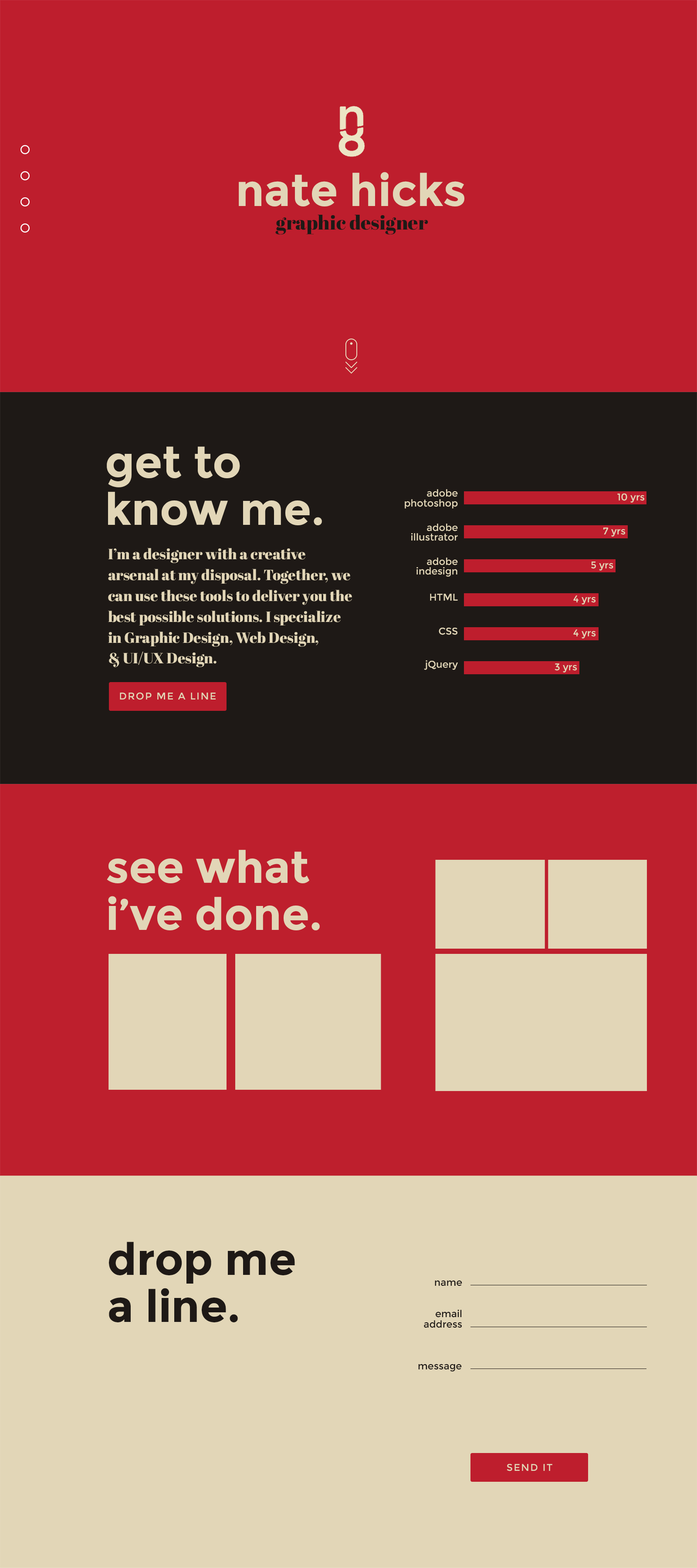
<style>
.page{position:relative;width:697px;height:1568px;background:#e2d6b7}
.page>*{position:absolute;margin:0}
.t1{font:44.6px "Montserrat-Bold";color:#e2d6b7}
.t2{font:19.7px "AbrilFatface-Regular";color:#1e1916}
.t3{font:44.4px/47px "Montserrat-Bold";color:#e2d6b7}
.t4{font:9.8px/9.8px "Montserrat-Regular";color:#e2d6b7}
.t5{font:9.8px "Montserrat-Regular";color:#e2d6b7}
.t6{font:14.8px/20.9px "AbrilFatface-Regular";color:#e2d6b7}
.t7{font:9.8px "Montserrat-Regular";letter-spacing:0.1em;color:#e2d6b7}
.t8{font:44.4px/47px "Montserrat-Bold";color:#1e1916}
.t9{font:9.8px "Montserrat-Regular";color:#1e1916}
.t10{font:9.8px/10.5px "Montserrat-Regular";color:#1e1916}
</style>
<div class="page">
<p class="t1" style="left:239px;top:172px;width:225px;height:34px">nate hicks</p>
<p class="t2" style="left:275px;top:215px;width:153px;height:20px">graphic designer</p>
<p class="t3" style="left:107px;top:446px;width:215px;height:79px">get to know me.</p>
<p class="t4" style="left:405px;top:489px;width:53px;height:20px;text-align:right">adobe<br>photoshop</p>
<p class="t5" style="left:617px;top:493px;width:27px;height:10px">10 yrs</p>
<p class="t4" style="left:411px;top:524px;width:47px;height:17px;text-align:right">adobe<br>illustrator</p>
<p class="t5" style="left:603px;top:527px;width:22px;height:10px">7 yrs</p>
<p class="t6" style="left:108px;top:548px;width:244px;height:119px">I’m a designer with a creative arsenal at my disposal. Together, we can use these tools to deliver you the best possible solutions. I specialize in Graphic Design, Web Design, <br>&amp; UI/UX Design.</p>
<p class="t4" style="left:416px;top:558px;width:42px;height:19px;text-align:right">adobe<br>indesign</p>
<p class="t5" style="left:591px;top:561px;width:22px;height:10px">5 yrs</p>
<p class="t5" style="left:430px;top:594px;width:28px;height:7px">HTML</p>
<p class="t5" style="left:573px;top:595px;width:22px;height:10px">4 yrs</p>
<p class="t5" style="left:439px;top:628px;width:18px;height:7px">CSS</p>
<p class="t5" style="left:573px;top:629px;width:22px;height:10px">4 yrs</p>
<p class="t5" style="left:424px;top:660px;width:34px;height:10px">jQuery</p>
<p class="t5" style="left:554px;top:663px;width:23px;height:9px">3 yrs</p>
<p class="t7" style="left:120px;top:693px;width:96px;height:7px">DROP ME A LINE</p>
<p class="t3" style="left:107px;top:850px;width:213px;height:80px">see what<br>i’ve done.</p>
<p class="t8" style="left:109px;top:1242px;width:186px;height:80px">drop me <br>a line.</p>
<p class="t9" style="left:435px;top:1280px;width:27px;height:6px">name</p>
<p class="t10" style="left:424px;top:1310px;width:38px;height:18px;text-align:right">email<br>address</p>
<p class="t9" style="left:418px;top:1364px;width:44px;height:8px">message</p>
<p class="t7" style="left:507px;top:1464px;width:45px;height:7px">SEND IT</p>
</div>
